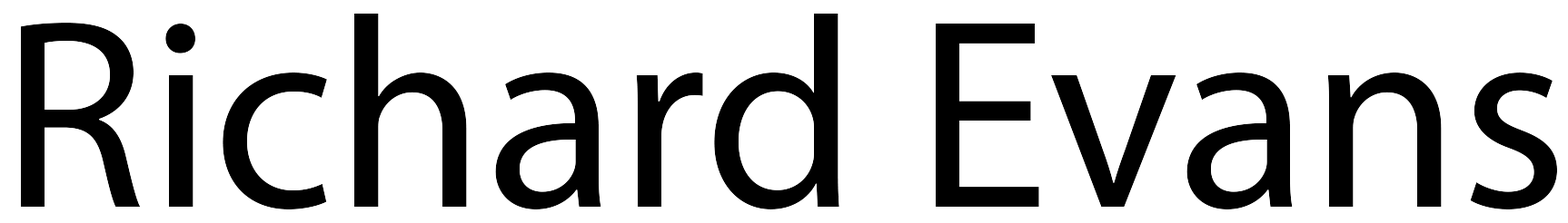
<style>
.page{position:relative;width:1568px;height:223px;background:#ffffff}
.page>*{position:absolute;margin:0}
.t1{font:272.5px "MyriadPro-Regular";color:#000000}
</style>
<div class="page">
<p class="t1" style="left:21px;top:14px;width:1536px;height:196px">Richard Evans</p>
</div>
